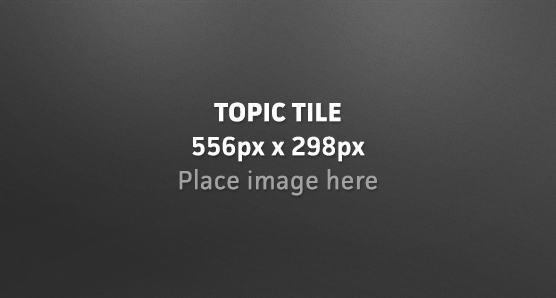
<style>
.page{position:relative;width:556px;height:298px}
.page>*{position:absolute;margin:0}
.t1{font:26px/34px "Facit-Regular";letter-spacing:0.02em;color:#a2a2a2}
.t2{font:26px/34px "Facit-Bold";letter-spacing:0.02em;color:#ffffff}
.t3{font:26px/34px "Facit-Semibold";letter-spacing:0.02em;color:#ffffff}
</style>
<div class="page">
<p class="t1" style="left:179px;top:102px;width:198px;height:94px;text-align:center"><span class="t2">TOPIC TILE<br></span><span class="t3">556px x 298px<br></span>Place image here</p>
</div>
